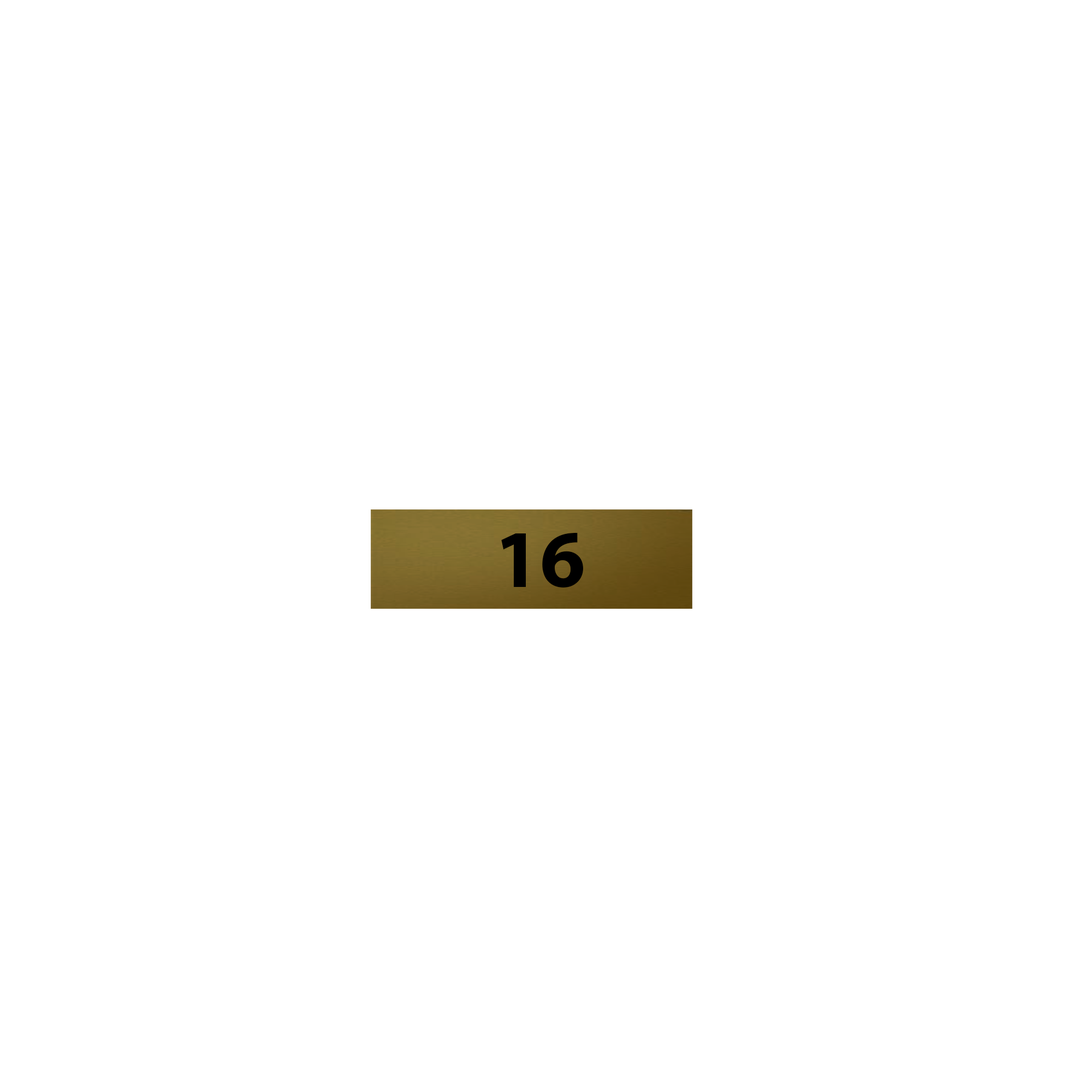
<style>
.page{position:relative;width:1092px;height:1092px;background:#ffffff}
.page>*{position:absolute;margin:0}
.t1{font:81.9px "MyriadPro-Bold";color:#000000}
</style>
<div class="page">
<p class="t1" style="left:501px;top:532px;width:82px;height:55px">16</p>
</div>
